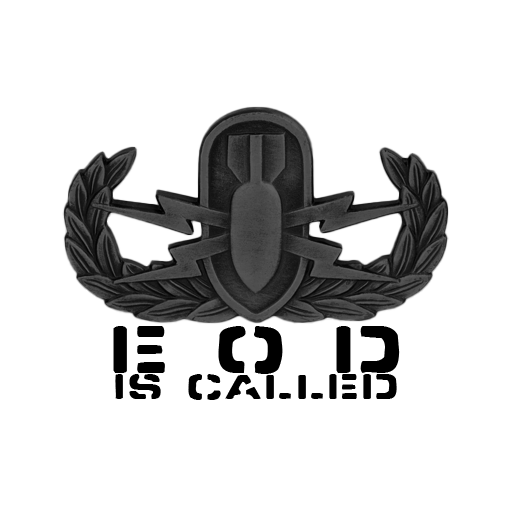
<style>
.page{position:relative;width:512px;height:512px;background:#ffffff}
.page>*{position:absolute;margin:0}
.t1{font:81.2px "SpacedockStencil";color:#000000;text-transform:uppercase}
.t2{font:42.7px "SpacedockStencil";color:#000000;text-transform:uppercase}
</style>
<div class="page">
<p class="t1" style="left:113px;top:326px;width:287px;height:48px">E O D</p>
<p class="t2" style="left:115px;top:374px;width:282px;height:26px">is called</p>
</div>
